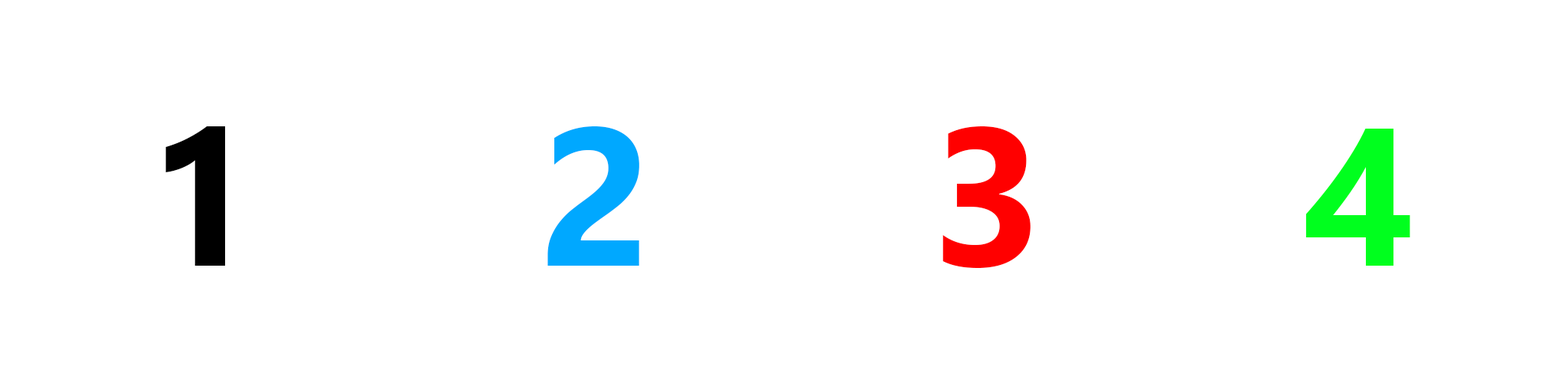
<style>
.page{position:relative;width:1568px;height:392px;background:#ffffff}
.page>*{position:absolute;margin:0}
.t1{font:196px "SegoeUI-Bold";color:#000000}
.t2{font:196px "SegoeUI-Bold";color:#00a8ff}
.t3{font:196px "SegoeUI-Bold";color:#ff0000}
.t4{font:196px "SegoeUI-Bold";color:#00ff1e}
</style>
<div class="page">
<p class="t1" style="left:165px;top:126px;width:60px;height:140px">1</p>
<p class="t2" style="left:547px;top:126px;width:92px;height:140px">2</p>
<p class="t3" style="left:942px;top:126px;width:89px;height:142px">3</p>
<p class="t4" style="left:1305px;top:129px;width:105px;height:137px">4</p>
</div>
